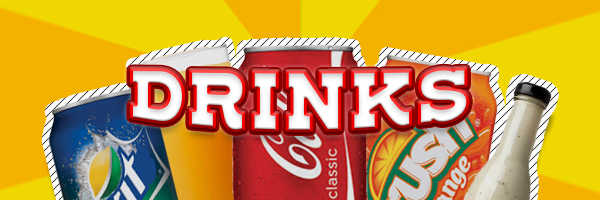
<style>
.page{position:relative;width:600px;height:200px}
.page>*{position:absolute;margin:0}
.t1{font:66.7px "HendersonSlabBasicBlack"}
</style>
<div class="page">
<p class="t1" style="left:131px;top:68px;width:337px;height:63px">DRINKS</p>
</div>
